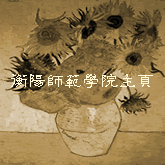
<style>
.page{position:relative;width:165px;height:165px}
.page>*{position:absolute;margin:0}
.t1{font:18px "FZLBFW--GB1-0";color:#fef8d8}
</style>
<div class="page">
<p class="t1" style="left:11px;top:74px;width:142px;height:14px">衡阳师范学院主页</p>
</div>
